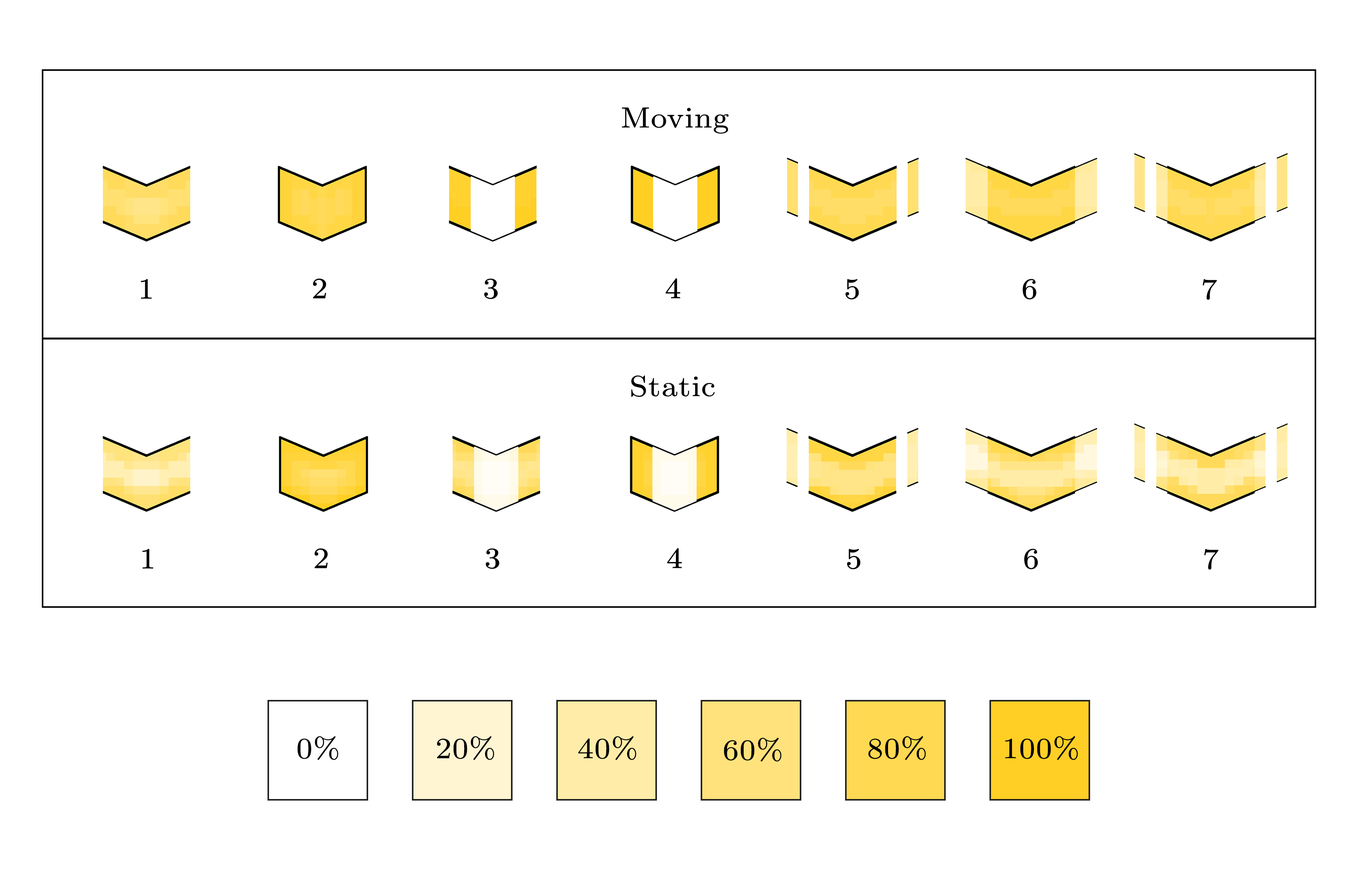
<style>
.page{position:relative;width:1358px;height:878px;background:#ffffff}
.page>*{position:absolute;margin:0}
.t1{font:29px "CMUSerif-Roman";color:#000000;font-weight:bold;scale:1.1 1}
</style>
<div class="page">
<p class="t1" style="left:622px;top:107px;width:107px;height:27px">Moving</p>
<p class="t1" style="left:141px;top:279px;width:11px;height:20px">1</p>
<p class="t1" style="left:313px;top:278px;width:13px;height:20px">2</p>
<p class="t1" style="left:484px;top:278px;width:14px;height:21px">3</p>
<p class="t1" style="left:665px;top:278px;width:16px;height:20px">4</p>
<p class="t1" style="left:846px;top:279px;width:13px;height:21px">5</p>
<p class="t1" style="left:1022px;top:279px;width:14px;height:21px">6</p>
<p class="t1" style="left:1202px;top:279px;width:15px;height:21px">7</p>
<p class="t1" style="left:631px;top:376px;width:84px;height:21px">Static</p>
<p class="t1" style="left:142px;top:549px;width:11px;height:20px">1</p>
<p class="t1" style="left:314px;top:548px;width:14px;height:20px">2</p>
<p class="t1" style="left:485px;top:548px;width:14px;height:21px">3</p>
<p class="t1" style="left:667px;top:548px;width:15px;height:20px">4</p>
<p class="t1" style="left:847px;top:549px;width:14px;height:20px">5</p>
<p class="t1" style="left:1024px;top:549px;width:14px;height:20px">6</p>
<p class="t1" style="left:1204px;top:549px;width:15px;height:21px">7</p>
<p class="t1" style="left:297px;top:736px;width:41px;height:24px">0%</p>
<p class="t1" style="left:437px;top:736px;width:57px;height:24px">20%</p>
<p class="t1" style="left:578px;top:736px;width:58px;height:24px">40%</p>
<p class="t1" style="left:724px;top:737px;width:58px;height:25px">60%</p>
<p class="t1" style="left:868px;top:736px;width:58px;height:24px">80%</p>
<p class="t1" style="left:1005px;top:736px;width:73px;height:24px">100%</p>
</div>
